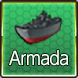
<style>
.page{position:relative;width:78px;height:78px}
.page>*{position:absolute;margin:0}
.t1{font:18px "UDShinGoPro-Regular";letter-spacing:-0.04em;color:#ffffff;scale:0.9 1}
</style>
<div class="page">
<p class="t1" style="left:9px;top:50px;width:60px;height:16px">Armada</p>
</div>
